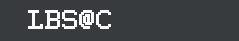
<style>
.page{position:relative;width:239px;height:41px;background:#373b3d}
.page>*{position:absolute;margin:0}
.t1{font:30px "Courier";color:#f9fafa;font-weight:bold}
</style>
<div class="page">
<p class="t1" style="left:28px;top:10px;width:83px;height:19px">LBS@C</p>
</div>
